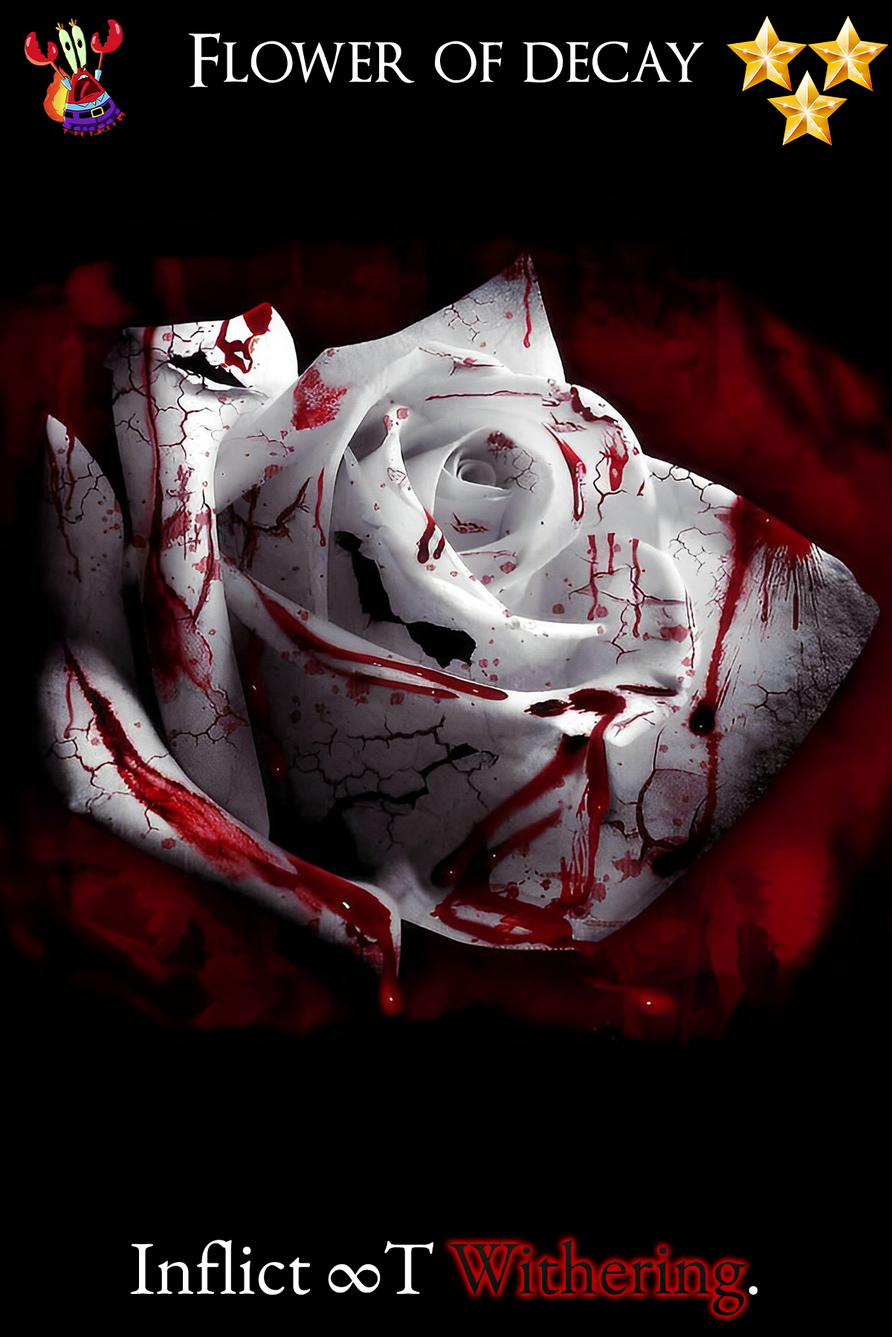
<style>
.page{position:relative;width:892px;height:1337px;background:#000000}
.page>*{position:absolute;margin:0}
.t1{font:123.3px "OptimusPrinceps";color:#ffffff}
.t2{font:130px "EBGaramond-Regular";color:#ffffff}
.t3{font:130px "EBGaramond-Regular";color:#1f1919}
.t4{font:130px "EBGaramond-Regular";color:#161212}
</style>
<div class="page">
<p class="t1" style="left:188px;top:33px;width:516px;height:55px">Flower of decay</p>
<p class="t2" style="left:130px;top:1240px;width:627px;height:77px">Inflict ∞T <span class="t3">Withering</span>.</p>
<p class="t4" style="left:449px;top:1240px;width:296px;height:76px">Withering</p>
</div>
